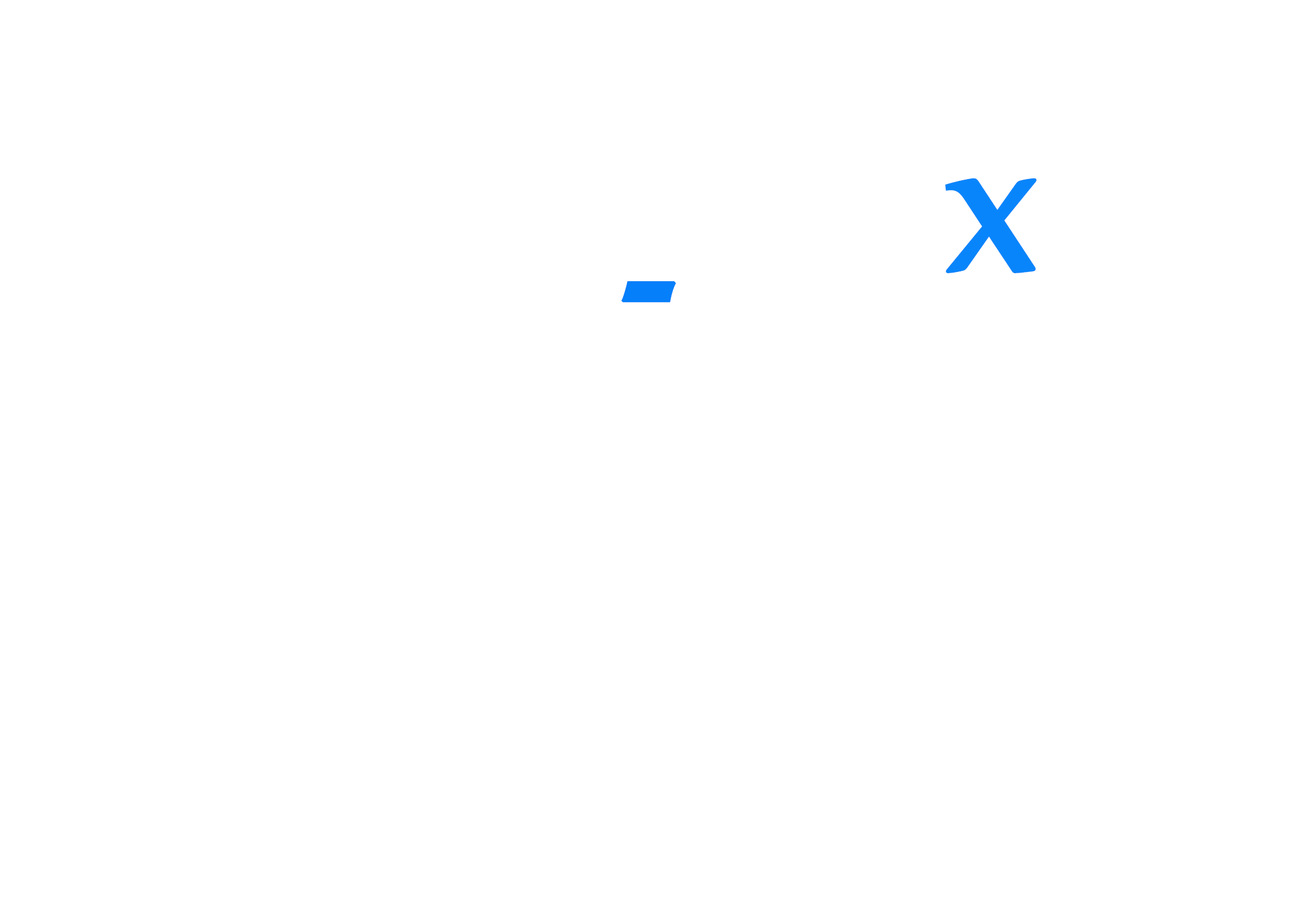
<style>
.page{position:relative;width:1292px;height:923px;background:#ffffff}
.page>*{position:absolute;margin:0}
.t1{font:254.9px "Nyala-Regular";color:#0985fb;scale:0.96 1}
.t2{font:188.9px "PalatinoLinotype-Bold";color:#067ffa;scale:0.96 1}
</style>
<div class="page">
<p class="t1" style="left:945px;top:178px;width:92px;height:95px">x</p>
<p class="t2" style="left:621px;top:281px;width:55px;height:22px">-</p>
</div>
